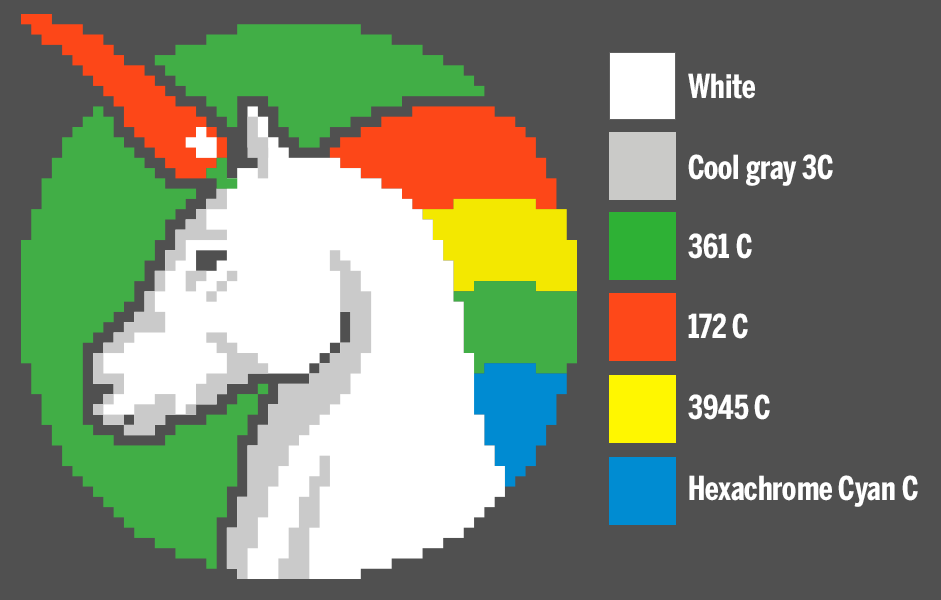
<style>
.page{position:relative;width:941px;height:600px;background:#505050}
.page>*{position:absolute;margin:0}
.t1{font:32.9px "BentonSansComp-Bold";color:#ffffff}
</style>
<div class="page">
<p class="t1" style="left:688px;top:73px;width:67px;height:26px">White</p>
<p class="t1" style="left:688px;top:154px;width:145px;height:32px">Cool gray 3C</p>
<p class="t1" style="left:688px;top:233px;width:64px;height:26px">361 C</p>
<p class="t1" style="left:688px;top:313px;width:60px;height:26px">172 C</p>
<p class="t1" style="left:688px;top:394px;width:82px;height:26px">3945 C</p>
<p class="t1" style="left:689px;top:475px;width:229px;height:32px">Hexachrome Cyan C</p>
</div>
